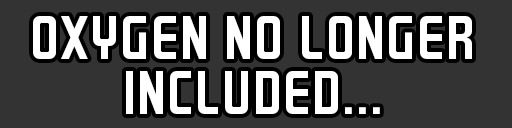
<style>
.page{position:relative;width:512px;height:128px;background:#333333}
.page>*{position:absolute;margin:0}
.t1{font:50px/54.2px "GRAYSTROKE";color:#ffffff}
</style>
<div class="page">
<p class="t1" style="left:33px;top:16px;width:439px;height:98px;text-align:center">OXYGEN NO LONGER INCLUDED...</p>
</div>
